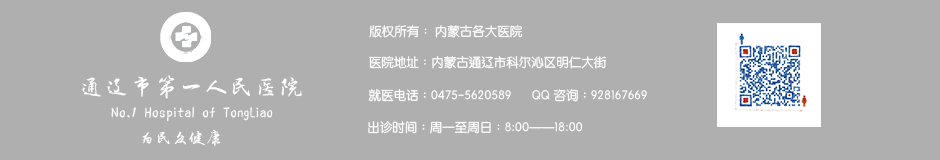
<style>
.page{position:relative;width:940px;height:160px;background:#afafaf}
.page>*{position:absolute;margin:0}
.t1{font:12.5px "STYuanti-TC-Regular";color:#ffffff}
.t2{font:25px "FZZJ-LJDFONT";color:#ffffff}
.t3{font:16.7px "FZZJ-LJDFONT";color:#ffffff}
</style>
<div class="page">
<p class="t1" style="left:369px;top:25px;width:154px;height:13px">版权所有：  内蒙古各大医院</p>
<p class="t1" style="left:369px;top:56px;width:238px;height:13px">医院地址：内蒙古通辽市科尔沁区明仁大街</p>
<p class="t2" style="left:82px;top:75px;width:220px;height:24px">通辽市第一人民医院</p>
<p class="t1" style="left:368px;top:89px;width:143px;height:13px">就医电话：0475-5620589</p>
<p class="t1" style="left:532px;top:89px;width:115px;height:13px">QQ咨询：928167669</p>
<p class="t3" style="left:111px;top:107px;width:162px;height:15px">No.1 Hospital of TongLiao</p>
<p class="t1" style="left:368px;top:121px;width:215px;height:13px">出诊时间：周一至周日：8:00——18:00</p>
<p class="t3" style="left:142px;top:129px;width:79px;height:17px">为民众健康</p>
</div>
